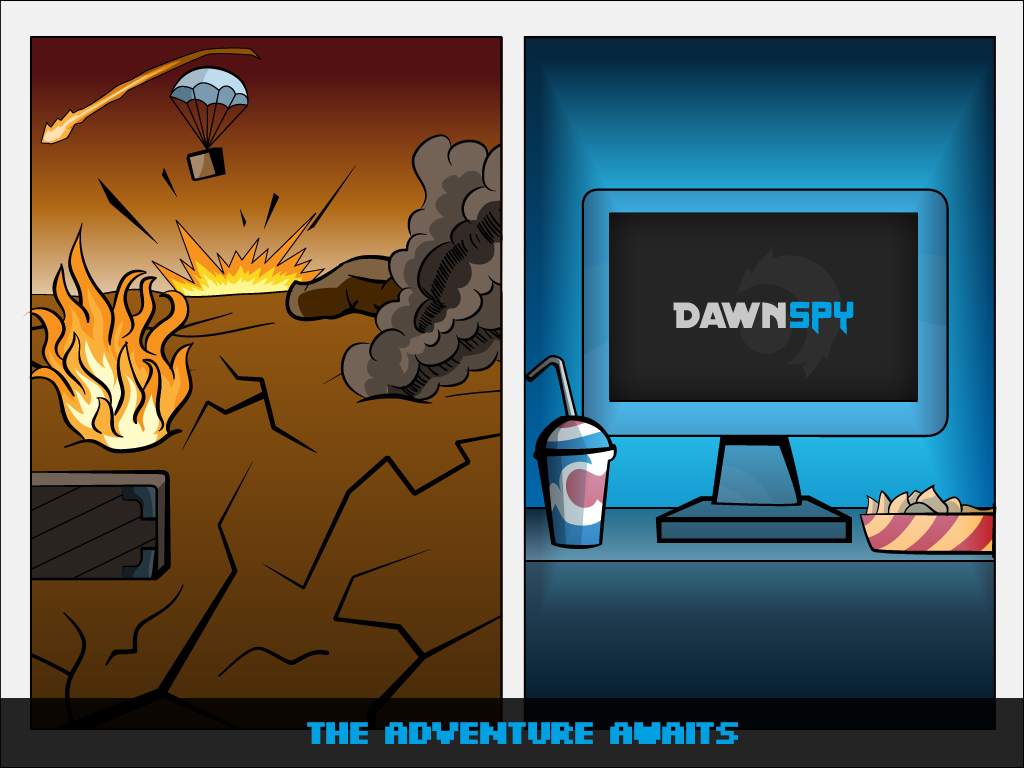
<style>
.page{position:relative;width:1024px;height:768px}
.page>*{position:absolute;margin:0}
.t1{font:36.4px "Silkscreen-Bold";letter-spacing:-0.18em;color:#00a0e3}
</style>
<div class="page">
<p class="t1" style="left:307px;top:722px;width:431px;height:22px">THE Adventure Awaits</p>
</div>
